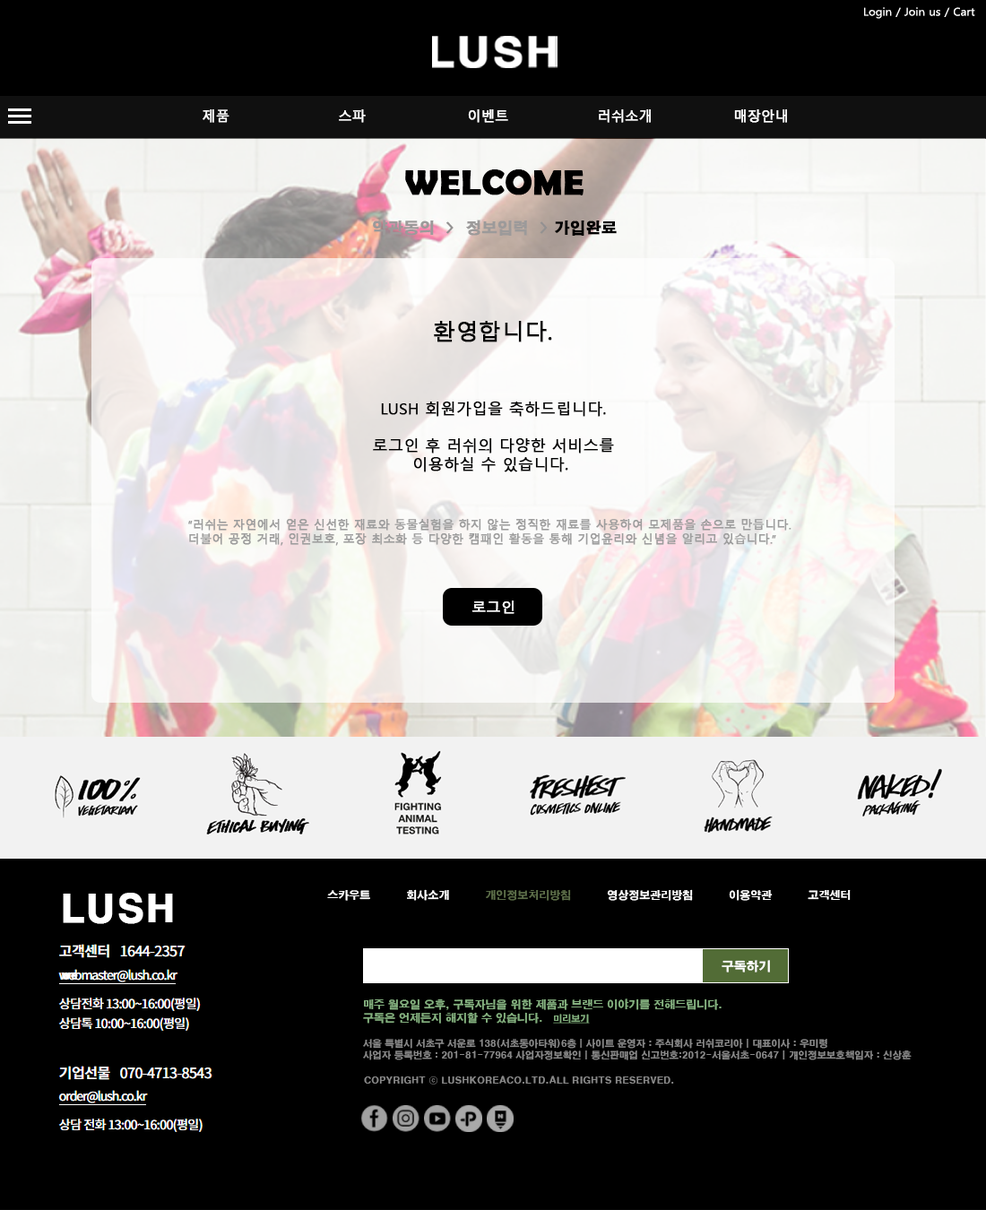
<style>
.page{position:relative;width:986px;height:1210px;background:#000000}
.page>*{position:absolute;margin:0}
.t1{font:10.8px "MalgunGothic";color:#ffffff;scale:1.07 1}
.t2{font:13.4px "MalgunGothic";color:#ffffff;font-weight:bold}
.t3{font:35.8px "BerlinSansFBDemi-Bold";color:#000000;font-weight:bold}
.t4{font:15.2px "H2gtrE";color:#9c9a9a;font-weight:bold}
.t5{font:15.2px "H2gtrE";color:#939191;font-weight:bold}
.t6{font:15.2px "H2gtrE";color:#000000;font-weight:bold}
.t7{font:22.4px "MalgunGothic";color:#000000;font-weight:bold}
.t8{font:15.2px "MalgunGothic";color:#000000;font-weight:bold}
.t9{font:11.6px "MalgunGothic";color:#9d9d9d;font-weight:bold}
.t10{font:14.3px "MalgunGothic";color:#ffffff;font-weight:bold}
.t11{font:37.3px "H2gtrE";color:#ffffff;font-weight:bold}
.t12{font:10.8px "H2gtrE";color:#ffffff}
.t13{font:10.8px "H2gtrE";color:#5b6c48}
.t14{font:12.4px "H2gtrE";color:#ffffff}
.t15{font:10.8px "H2gtrE";color:#ffffff;font-weight:bold}
.t16{font:10.8px "H2gtrE";color:#84b07f}
.t17{font:9px "H2gtrE";color:#84b07f;text-decoration:underline}
.t18{font:9.4px "H2gtrE";color:#888888}
</style>
<div class="page">
<p class="t1" style="left:864px;top:7px;width:111px;height:12px">Login / Join us / Cart</p>
<p class="t2" style="left:203px;top:109px;width:26px;height:14px">제품</p>
<p class="t2" style="left:339px;top:109px;width:27px;height:14px">스파</p>
<p class="t2" style="left:468px;top:109px;width:40px;height:14px">이벤트</p>
<p class="t2" style="left:599px;top:109px;width:52px;height:14px">러쉬소개</p>
<p class="t2" style="left:734px;top:109px;width:53px;height:14px">매장안내</p>
<p class="t3" style="left:405px;top:169px;width:178px;height:26px">WELCOME</p>
<p class="t4" style="left:373px;top:220px;width:244px;height:16px">약관동의  <span class="t5">&gt;  </span>정보입력<span class="t5">  &gt; </span><span class="t6">가입완료</span></p>
<p class="t7" style="left:434px;top:321px;width:118px;height:21px">환영합니다.</p>
<p class="t8" style="left:373px;top:401px;width:241px;height:71px;text-align:center">LUSH 회원가입을 축하드립니다.<br><br>로그인 후 러쉬의 다양한 서비스를<br>이용하실 수 있습니다.</p>
<p class="t9" style="left:188px;top:519px;width:603px;height:27px">“러쉬는 자연에서 얻은 신선한 재료와 동물실험을 하지 않는 정직한 재료를 사용하여 모제품을 손으로 만듭니다.<br>더불어 공정 거래, 인권보호, 포장 최소화 등 다양한 캠패인 활동을 통해 기업윤리와 신념을 알리고 있습니다.”</p>
<p class="t10" style="left:471px;top:600px;width:43px;height:14px">로그인</p>
<p class="t11" style="left:63px;top:893px;width:110px;height:31px">LUSH</p>
<p class="t12" style="left:327px;top:889px;width:523px;height:12px">스카우트          회사소개          <span class="t13">개인정보처리방침 </span>         영상정보관리방침          이용약관          고객센터</p>
<p class="t14" style="left:721px;top:960px;width:49px;height:12px">구독하기</p>
<p class="t15" style="left:61px;top:972px;width:17px;height:7px">we</p>
<p class="t16" style="left:363px;top:998px;width:358px;height:25px">매주 월요일 오후, 구독자님을 위한 제품과 브랜드 이야기를 전해드립니다.<br>구독은 언제든지 해지할 수 있습니다.   <span class="t17">미리보기</span></p>
<p class="t18" style="left:363px;top:1039px;width:548px;height:21px">서울 특별시 서초구 서운로 138(서초동아타워)6층 | 사이트 운영자 : 주식회사 러쉬코리아 | 대표이사 : 우미령<br>사업자 등록번호 : 201-81-77964 사업자정보확인 | 통신판매업 신고번호:2012-서울서초-0647 | 개인정보보호책임자 : 신상훈</p>
<p class="t18" style="left:364px;top:1075px;width:310px;height:9px">COPYRIGHT ⓒ LUSHKOREACO.LTD.ALL RIGHTS RESERVED.</p>
</div>
